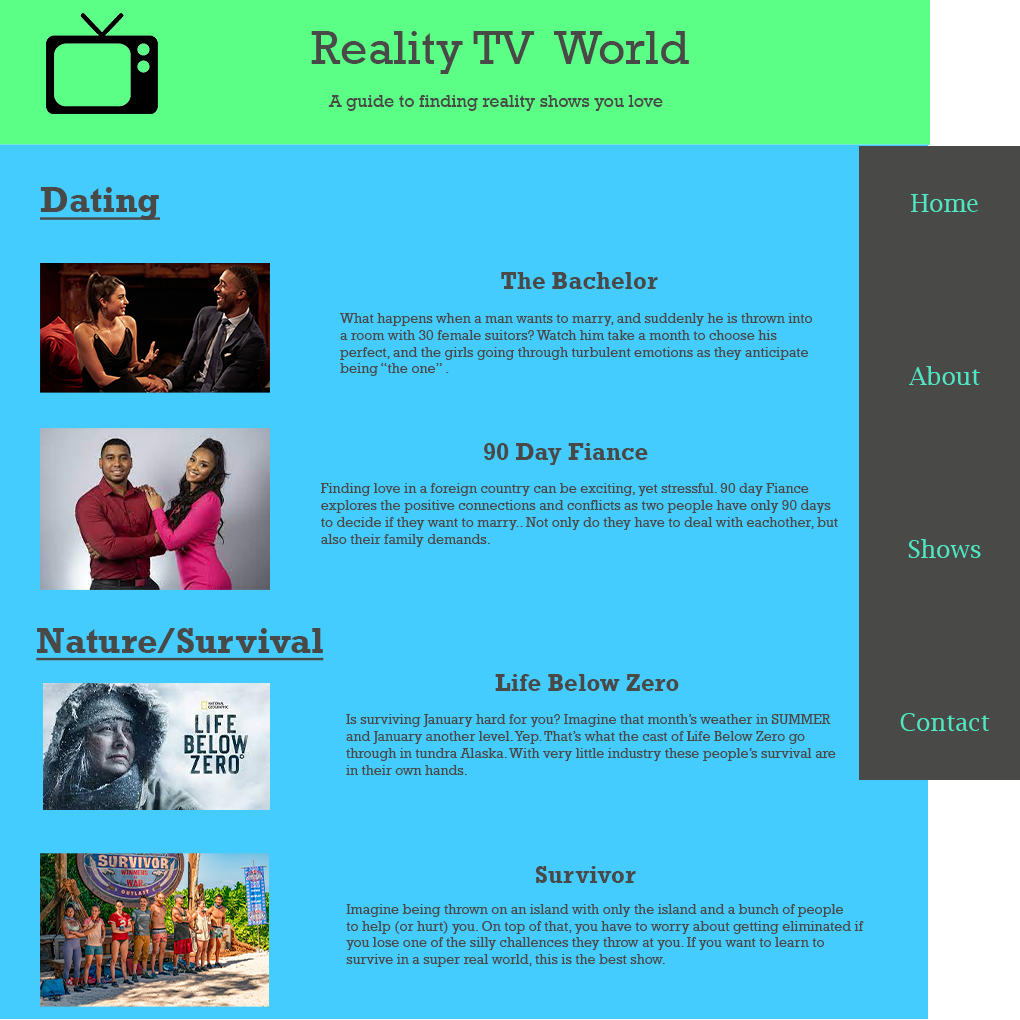
<style>
.page{position:relative;width:1020px;height:1020px;background:#44ccff}
.page>*{position:absolute;margin:0}
.t1{font:18px "Rockwell";color:#494947}
.t2{font:48px "Rockwell";color:#494947}
.t3{font:36px "Rockwell-Bold";color:#494947;text-decoration:underline}
.t4{font:24px "LucidaBright";color:#50e6c2}
.t5{font:14px "Rockwell";color:#494947}
.t6{font:36px "Rockwell-Bold";color:#44ccff}
.t7{font:24px "Rockwell-Bold";color:#494947}
.t8{font:12px "MyriadPro-Regular";color:#494947}
</style>
<div class="page">
<p class="t1" style="left:311px;top:31px;width:378px;height:80px"><span class="t2">Reality TV  World<br></span><br>    A guide to finding reality shows you love</p>
<p class="t3" style="left:40px;top:187px;width:120px;height:33px">Dating</p>
<p class="t4" style="left:900px;top:194px;width:90px;height:537px;text-align:center">Home<br><br><br><br><br><br>About<br><br><br><br><br><br>Shows<br><br><br><br><br><br>Contact</p>
<p class="t5" style="left:339px;top:264px;width:473px;height:112px"><span class="t6">Lorem ip</span><span class="t7">The Bachelor</span><span class="t6">sum d<br></span><br>What happens when a man wants to marry, and suddenly he is thrown into  a room with 30 female suitors? Watch him take a month to choose his perfect, and the girls going through turbulent emotions as they anticipate<br>being “the one” .<br><span class="t6">or sit amet, consectetur adipiscing elit, sed do eiusmod tempor incididunt ut labore et dolore magna aliqua. Quis ipsum suspendisse ultrices gravida. Risus commodo viverra maecenas accumsan lacus vel facilisis.</span></p>
<p class="t5" style="left:320px;top:443px;width:518px;height:104px"><span class="t7">                           90 Day Fiance<br></span><br>Finding love in a foreign country can be exciting, yet stressful. 90 day Fiance<br>explores the positive connections and conflicts as two people have only 90 days<br>to decide if they want to marry.. Not only do they have to deal with eachother, but<br>also their family demands.</p>
<p class="t3" style="left:36px;top:628px;width:288px;height:33px">Nature/Survival</p>
<p class="t5" style="left:346px;top:674px;width:490px;height:101px;text-align:center"><span class="t7">    Life Below Zero<br></span><br>Is surviving January hard for you? Imagine that month’s weather in SUMMER <br>and January another level. Yep. That’s what the cast of Life Below Zero go <br>through in tundra Alaska. With very little industry these people’s survival are <br>in their own hands.</p>
<p class="t5" style="left:346px;top:866px;width:518px;height:101px;text-align:center"><span class="t8">                                                                                                                                                                                            </span><span class="t7">Survivor<br><br></span>Imagine being thrown on an island with only the island and a bunch of people <br>to help (or hurt) you. On top of that, you have to worry about getting eliminated if <br>you lose one of the silly challences they throw at you. If you want to learn to <br>survive in a super real world, this is the best show.</p>
</div>
